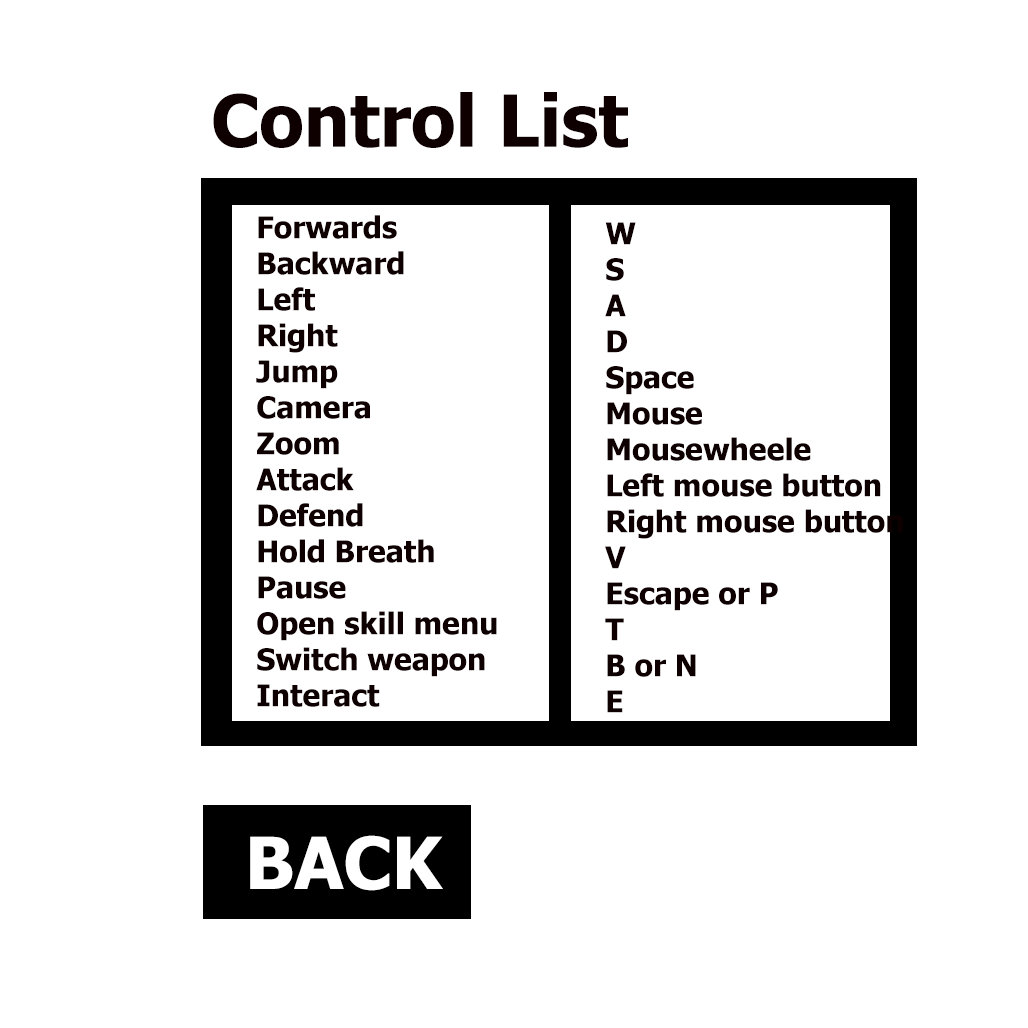
<style>
.page{position:relative;width:1028px;height:1028px;background:#ffffff}
.page>*{position:absolute;margin:0}
.t1{font:72px "Tahoma-Bold";color:#0e0000}
.t2{font:30px "Tahoma-Bold";color:#0e0000}
.t3{font:72px "Tahoma-Bold";color:#ffffff}
</style>
<div class="page">
<p class="t1" style="left:213px;top:92px;width:415px;height:56px">Control List</p>
<p class="t2" style="left:256px;top:215px;width:241px;height:492px">Forwards<br>Backward<br>Left<br>Right<br>Jump<br>Camera<br>Zoom<br>Attack<br>Defend<br>Hold Breath<br>Pause<br>Open skill menu<br>Switch weapon<br>Interact</p>
<p class="t2" style="left:605px;top:222px;width:298px;height:491px">W<br>S<br>A<br>D<br>Space<br>Mouse<br>Mousewheele<br>Left mouse button<br>Right mouse button<br>V<br>Escape or P<br>T<br>B or N<br>E</p>
<p class="t3" style="left:250px;top:835px;width:193px;height:56px">BACK</p>
</div>
